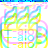
<style>
.page{position:relative;width:48px;height:48px;background:#ffffff}
.page>*{position:absolute;margin:0}
.t1{font:12px "MicrosoftYaHei"}
.t2{font:14px "MicrosoftYaHei"}
</style>
<div class="page">
<p class="t1" style="left:4px;top:28px;width:31px;height:11px"><span class="t2">T</span>-aio</p>
</div>
